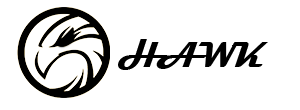
<style>
.page{position:relative;width:300px;height:110px;background:#ffffff}
.page>*{position:absolute;margin:0}
.t1{font:36px "Magneto-Bold";color:#000000}
</style>
<div class="page">
<p class="t1" style="left:118px;top:39px;width:150px;height:31px">HAWK</p>
</div>
